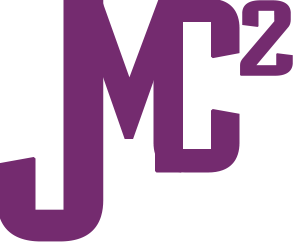
<style>
.page{position:relative;width:293px;height:242px;background:#ffffff}
.page>*{position:absolute;margin:0}
.t1{font:237.9px "PosterGothicExCondATF-Medium";letter-spacing:0.08em;color:#742b6f;font-weight:bold;scale:1.09 1}
.t2{font:238.5px "PosterGothicExCondATF-Medium";letter-spacing:0.08em;color:#742b6f;font-weight:bold;scale:1.1 1}
.t3{font:103.7px "PosterGothicExCondATF-Medium";letter-spacing:0.08em;color:#742b6f;font-weight:bold;scale:1.48 1}
</style>
<div class="page">
<p class="t1" style="left:75px;top:0px;width:108px;height:173px">M</p>
<p class="t2" style="left:153px;top:0px;width:87px;height:173px">C</p>
<p class="t3" style="left:240px;top:0px;width:53px;height:76px">2</p>
</div>
